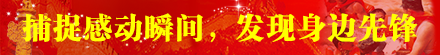
<style>
.page{position:relative;width:440px;height:55px}
.page>*{position:absolute;margin:0}
.t1{font:29px "FZCSJW--GB1-0";letter-spacing:0.05em;color:#ffff00}
</style>
<div class="page">
<p class="t1" style="left:22px;top:13px;width:396px;height:30px">捕捉感动瞬间，发现身边先锋</p>
</div>
